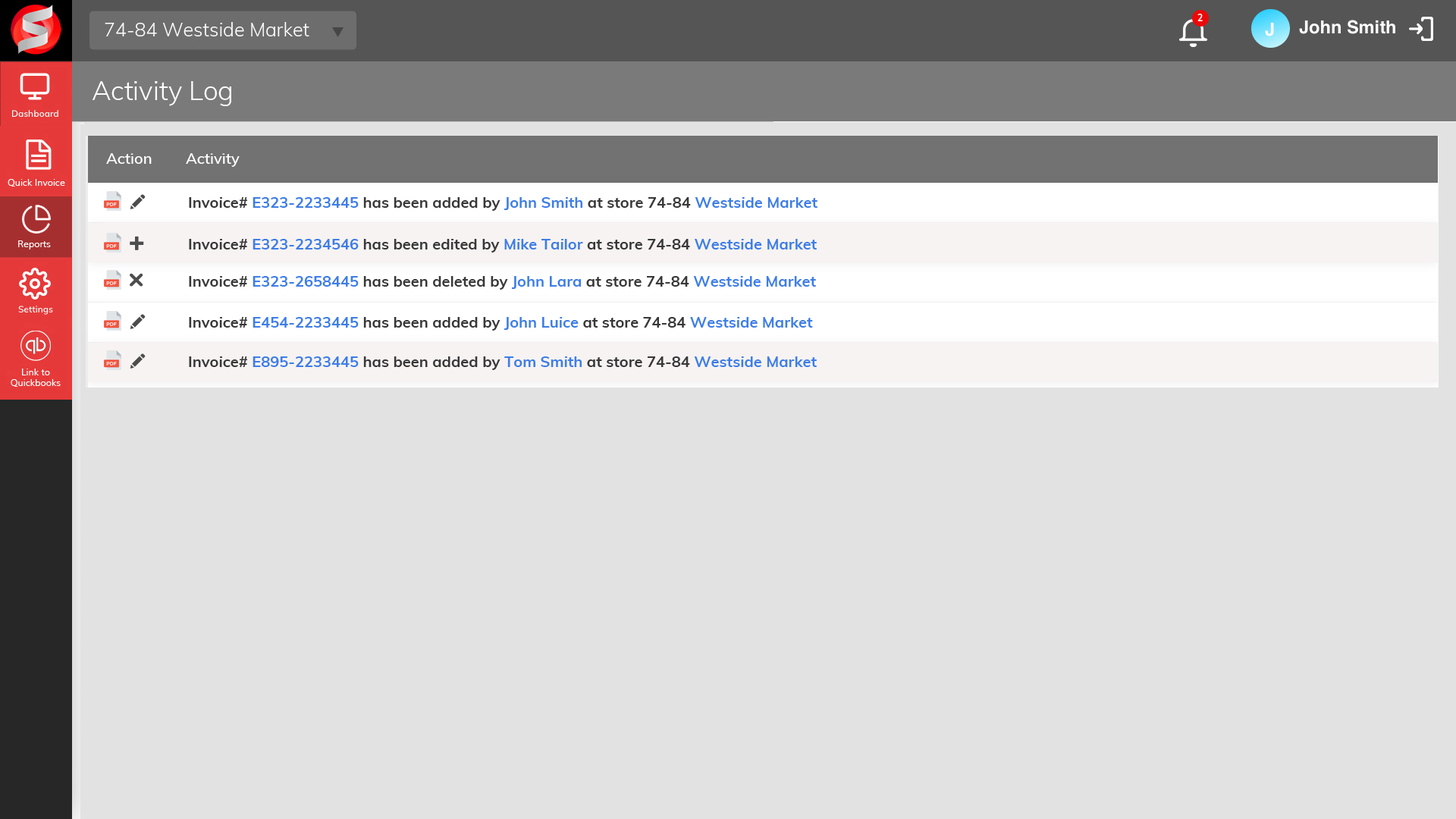
<style>
.page{position:relative;width:1456px;height:819px;background:#e2e2e2}
.page>*{position:absolute;margin:0}
.t1{font:26.5px "Muli-Light";color:#ffffff}
.t2{font:15.2px "Muli-SemiBold";color:#ffffff}
.t3{font:15.2px "Muli-Bold";color:#383838}
.t4{font:15.2px "Muli-Bold";color:#3e7de7}
</style>
<div class="page">
<p class="t1" style="left:92px;top:81px;width:139px;height:25px">Activity Log</p>
<p class="t2" style="left:106px;top:153px;width:46px;height:11px">Action</p>
<p class="t2" style="left:186px;top:153px;width:54px;height:14px">Activity</p>
<p class="t3" style="left:189px;top:197px;width:628px;height:14px">Invoice# <span class="t4">E323-2233445</span> has been added by <span class="t4">John Smith</span> at store 74-84 <span class="t4">Westside Market</span></p>
<p class="t3" style="left:189px;top:239px;width:628px;height:14px">Invoice# <span class="t4">E323-2234546</span> has been edited by <span class="t4">Mike Tailor</span> at store 74-84 <span class="t4">Westside Market</span></p>
<p class="t3" style="left:189px;top:276px;width:627px;height:14px">Invoice# <span class="t4">E323-2658445</span> has been deleted by <span class="t4">John Lara</span> at store 74-84 <span class="t4">Westside Market</span></p>
<p class="t3" style="left:189px;top:317px;width:624px;height:14px">Invoice# <span class="t4">E454-2233445</span> has been added by <span class="t4">John Luice</span> at store 74-84 <span class="t4">Westside Market</span></p>
<p class="t3" style="left:189px;top:356px;width:628px;height:14px">Invoice# <span class="t4">E895-2233445</span> has been added by <span class="t4">Tom Smith</span> at store 74-84 <span class="t4">Westside Market</span></p>
</div>
